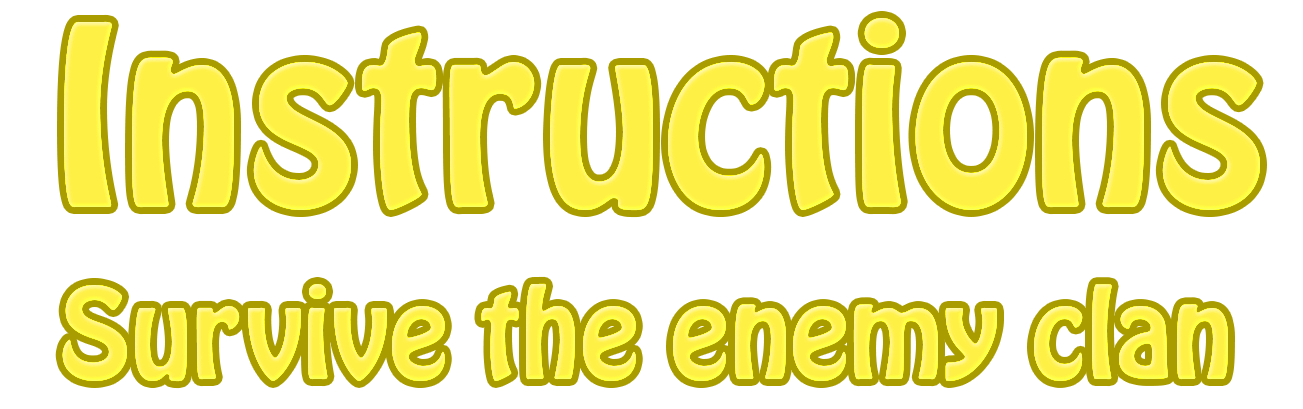
<style>
.page{position:relative;width:1303px;height:409px;background:#ffffff}
.page>*{position:absolute;margin:0}
.t1{font:222px "HoboStd";color:#fff046}
.t2{font:111px "HoboStd";color:#fff249}
</style>
<div class="page">
<p class="t1" style="left:64px;top:18px;width:1196px;height:193px">Instructions</p>
<p class="t2" style="left:62px;top:283px;width:1166px;height:99px">Survive the enemy clan</p>
</div>
